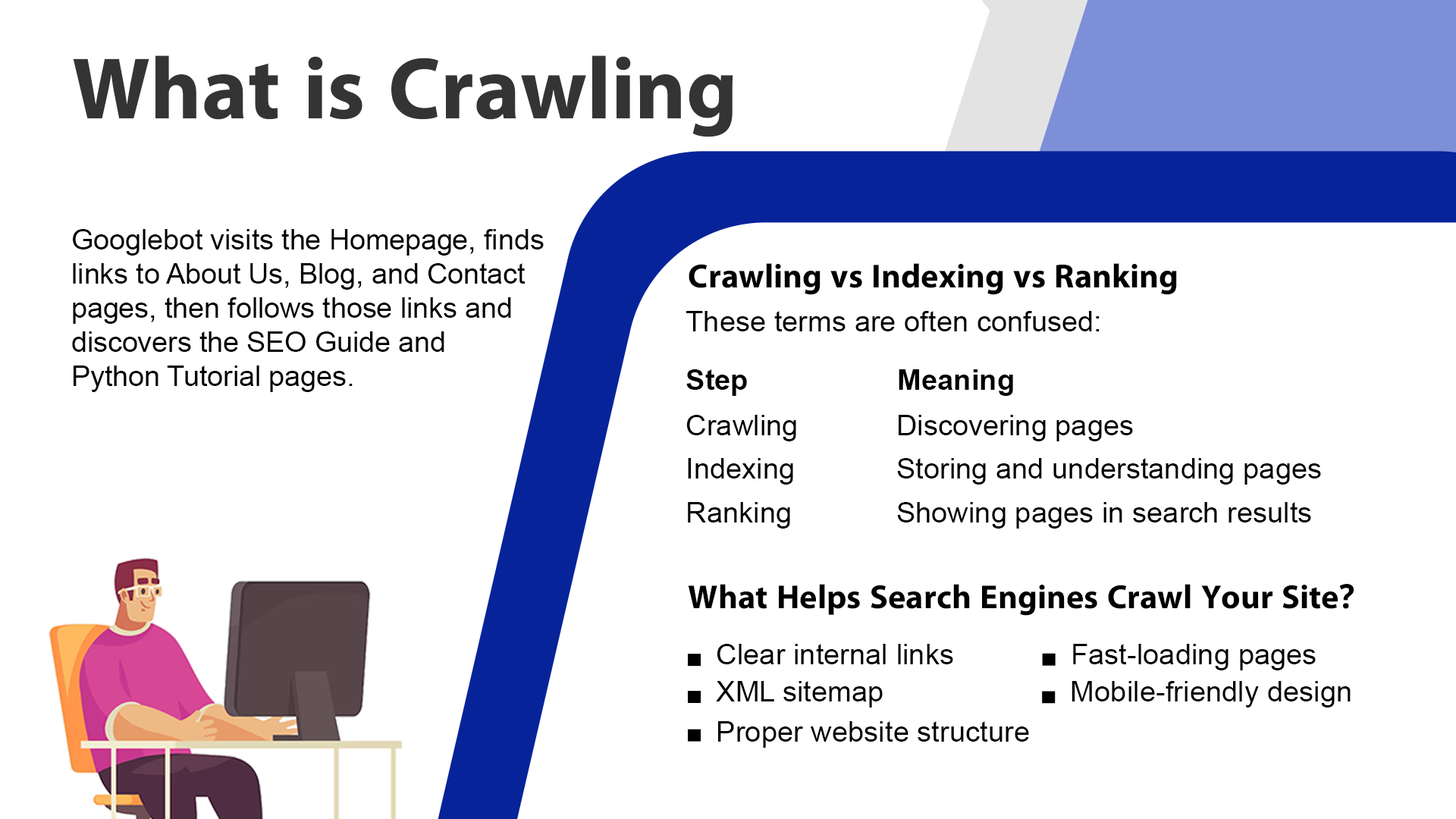
<style>
.page{position:relative;width:1456px;height:819px;background:#ffffff}
.page>*{position:absolute;margin:0}
.t1{font:88px "iKampuchea001_O'Chrov";color:#343434}
.t2{font:28.5px "ArialMT";color:#000000}
.t3{font:33.6px "iKampuchea001_O'Chrov";color:#000000}
.t4{font:28.9px "ArialMT";color:#000000}
.t5{font:28.9px "Arial-BoldMT";color:#000000}
.t6{font:29px "ArialMT";color:#000000}
.t7{font:28.8px "ArialMT";color:#000000}
</style>
<div class="page">
<p class="t1" style="left:73px;top:55px;width:660px;height:82px">What is Crawling</p>
<p class="t2" style="left:72px;top:229px;width:472px;height:163px">Googlebot visits the Homepage, finds <br>links to About Us, Blog, and Contact <br>pages, then follows those links and <br>discovers the SEO Guide and <br>Python Tutorial pages.</p>
<p class="t3" style="left:689px;top:263px;width:488px;height:32px">Crawling vs Indexing vs Ranking</p>
<p class="t4" style="left:686px;top:311px;width:414px;height:20px">These terms are often confused:</p>
<p class="t5" style="left:686px;top:369px;width:61px;height:27px">Step</p>
<p class="t5" style="left:899px;top:369px;width:114px;height:27px">Meaning</p>
<p class="t6" style="left:686px;top:415px;width:110px;height:26px">Crawling</p>
<p class="t6" style="left:899px;top:415px;width:234px;height:26px">Discovering pages</p>
<p class="t6" style="left:688px;top:458px;width:105px;height:27px">Indexing</p>
<p class="t6" style="left:897px;top:458px;width:424px;height:27px">Storing and understanding pages</p>
<p class="t6" style="left:688px;top:502px;width:102px;height:27px">Ranking</p>
<p class="t6" style="left:897px;top:502px;width:414px;height:27px">Showing pages in search results</p>
<p class="t3" style="left:688px;top:584px;width:666px;height:32px">What Helps Search Engines Crawl Your Site?</p>
<p class="t4" style="left:717px;top:644px;width:236px;height:20px">Clear internal links</p>
<p class="t7" style="left:1073px;top:644px;width:243px;height:26px">Fast-loading pages</p>
<p class="t7" style="left:716px;top:681px;width:167px;height:27px">XML sitemap</p>
<p class="t2" style="left:1072px;top:681px;width:279px;height:27px">Mobile-friendly design</p>
<p class="t4" style="left:718px;top:721px;width:311px;height:27px">Proper website structure</p>
</div>
